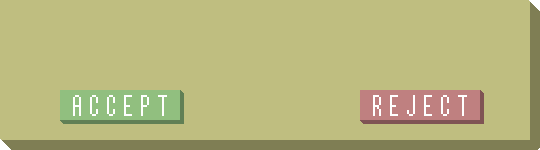
<style>
.page{position:relative;width:540px;height:150px;background:#bfbe80}
.page>*{position:absolute;margin:0}
.t1{font:30px "ReturnOfGanonReg";letter-spacing:0.2em;color:#ffffff}
</style>
<div class="page">
<p class="t1" style="left:73px;top:95px;width:94px;height:21px">ACCEPT</p>
<p class="t1" style="left:373px;top:95px;width:94px;height:21px">REJECT</p>
</div>
